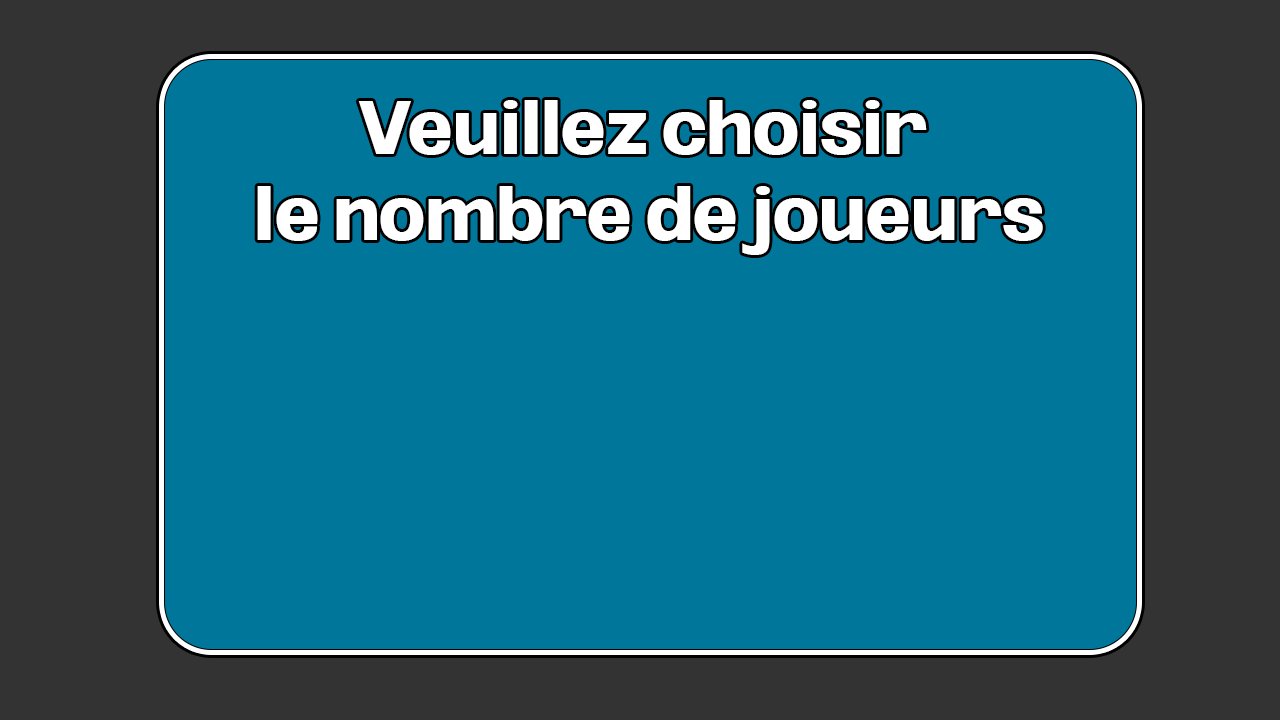
<style>
.page{position:relative;width:1280px;height:720px;background:#00769a}
.page>*{position:absolute;margin:0}
.t1{font:72px "Oddlini-ExtraBold";color:#ffffff}
</style>
<div class="page">
<p class="t1" style="left:257px;top:100px;width:786px;height:155px;text-align:center">Veuillez choisir <br>le nombre de joueurs</p>
</div>
